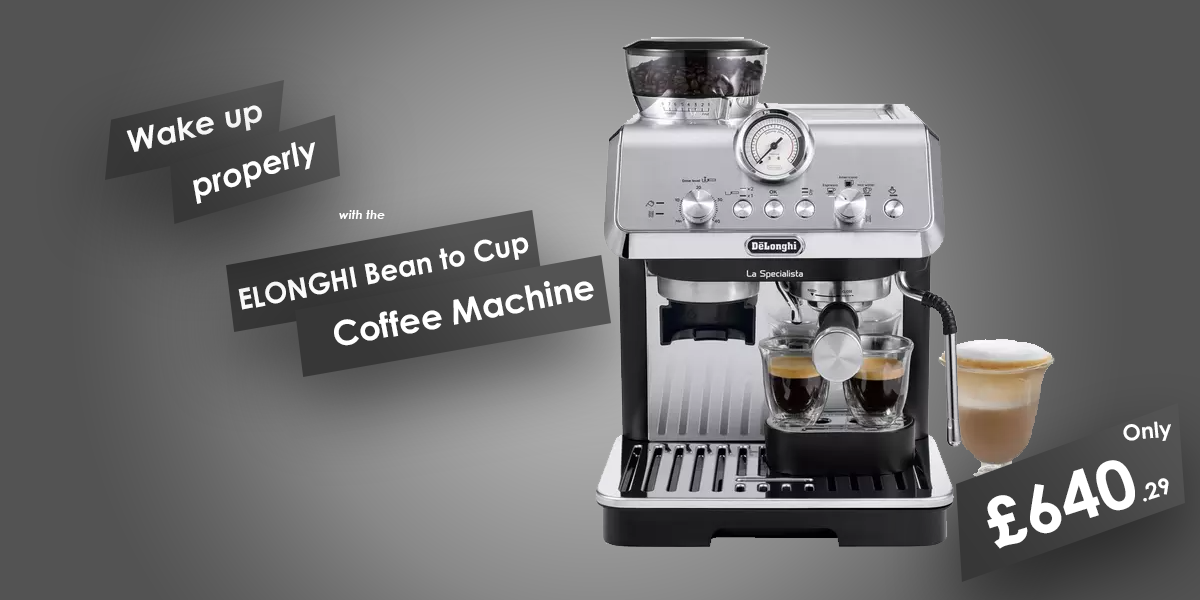
<style>
.page{position:relative;width:1200px;height:600px}
.page>*{position:absolute;margin:0}
.t1{font:31.2px "CenturyGothic-BoldItalic";color:#ffffff;scale:1.03 1}
.t2{font:32.3px "CenturyGothic-BoldItalic";color:#ffffff}
.t3{font:12.3px "CenturyGothic-BoldItalic";color:#ffffff}
.t4{font:28.7px "CenturyGothic-Bold";color:#ffffff}
.t5{font:34.1px "CenturyGothic-Bold";color:#ffffff}
.t6{font:21.9px "CenturyGothic-Bold";color:#ffffff}
.t7{font:67.3px "CenturyGothic-Bold";color:#ffffff}
.t8{font:22.3px "CenturyGothic-Bold";color:#ffffff}
</style>
<div class="page">
<p class="t1" style="left:126px;top:105px;width:136px;height:47px;rotate:-14deg">Wake up</p>
<p class="t2" style="left:193px;top:142px;width:122px;height:62px;rotate:-18deg">properly</p>
<p class="t3" style="left:339px;top:210px;width:46px;height:9px">with the</p>
<p class="t4" style="left:238px;top:237px;width:291px;height:73px;rotate:-11deg">ELONGHI Bean to Cup</p>
<p class="t5" style="left:334px;top:281px;width:260px;height:65px;rotate:-11deg">Coffee Machine</p>
<p class="t6" style="left:1123px;top:421px;width:48px;height:20px;rotate:-5deg">Only</p>
<p class="t7" style="left:987px;top:460px;width:182px;height:89px;rotate:-18deg">£640<span class="t8">.29</span></p>
</div>
